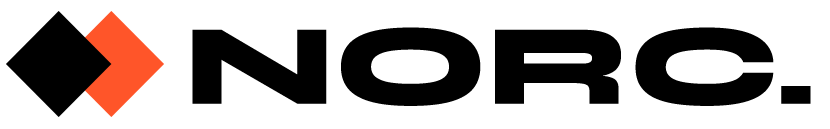
<style>
.page{position:relative;width:830px;height:129px;background:#ffffff}
.page>*{position:absolute;margin:0}
.t1{font:115px "Syne-ExtraBold";color:#000000}
</style>
<div class="page">
<p class="t1" style="left:192px;top:27px;width:619px;height:79px">NORC.</p>
</div>
